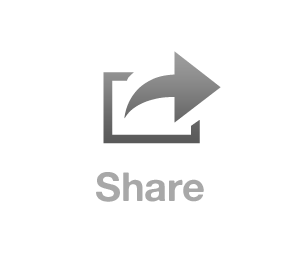
<style>
.page{position:relative;width:300px;height:260px;background:#ffffff}
.page>*{position:absolute;margin:0}
.t1{font:40px "AlteHaasGrotesk_Bold";color:#a8a8a8}
</style>
<div class="page">
<p class="t1" style="left:96px;top:172px;width:108px;height:30px">Share</p>
</div>
